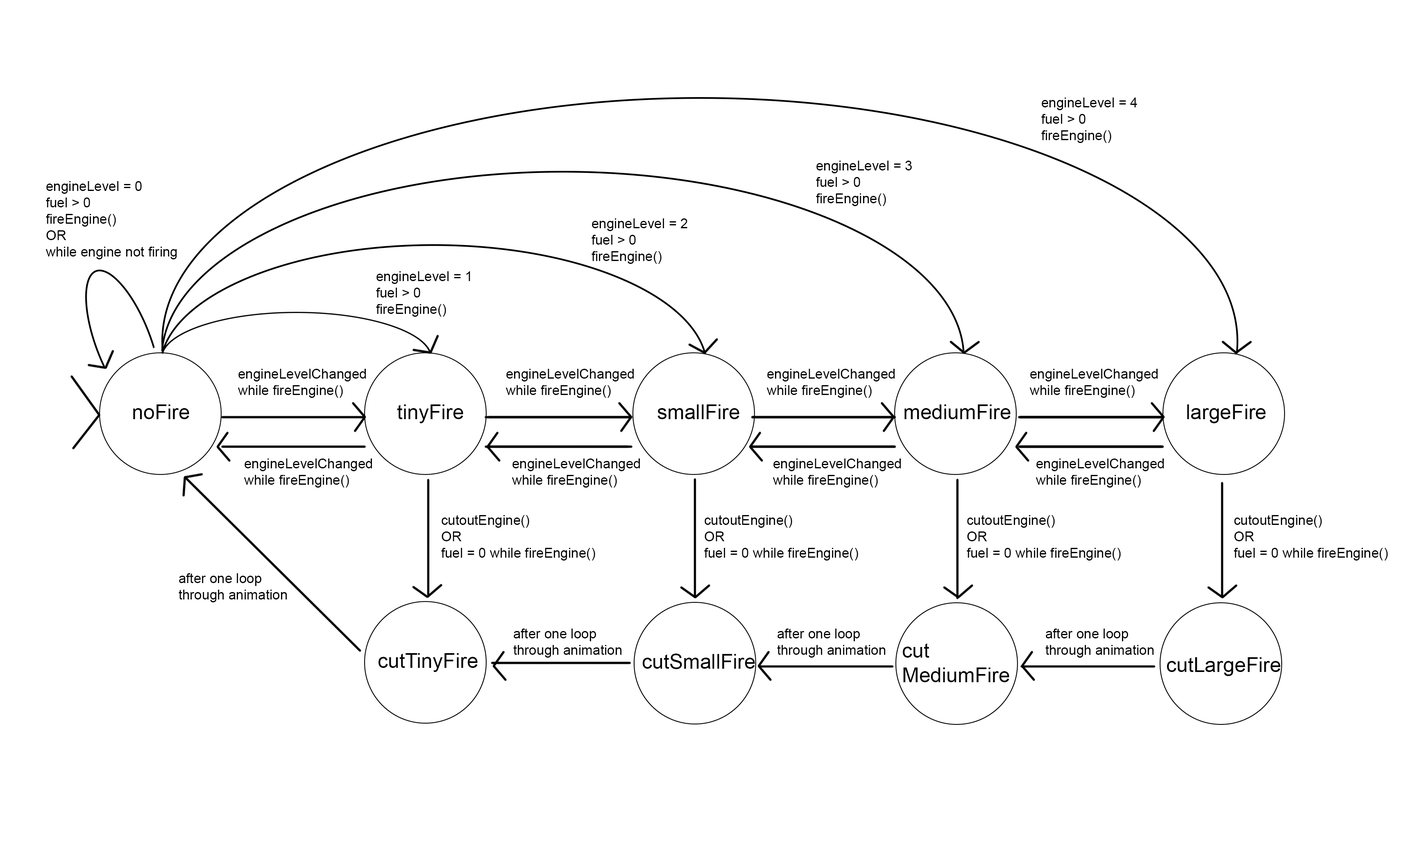
<style>
.page{position:relative;width:1405px;height:849px;background:#ffffff}
.page>*{position:absolute;margin:0}
.t1{font:13.7px "ArialMT";color:#000000}
.t2{font:20.5px "ArialMT";color:#000000}
</style>
<div class="page">
<p class="t1" style="left:1041px;top:97px;width:96px;height:46px">engineLevel = 4<br>fuel &gt; 0<br>fireEngine()</p>
<p class="t1" style="left:816px;top:161px;width:96px;height:45px">engineLevel = 3<br>fuel &gt; 0<br>fireEngine()</p>
<p class="t1" style="left:45px;top:181px;width:132px;height:78px">engineLevel = 0<br>fuel &gt; 0<br>fireEngine()<br>OR<br>while engine not firing</p>
<p class="t1" style="left:591px;top:218px;width:96px;height:46px">engineLevel = 2<br>fuel &gt; 0<br>fireEngine()</p>
<p class="t1" style="left:376px;top:271px;width:94px;height:46px">engineLevel = 1<br>fuel &gt; 0<br>fireEngine()</p>
<p class="t1" style="left:238px;top:369px;width:128px;height:29px">engineLevelChanged<br>while fireEngine()</p>
<p class="t1" style="left:505px;top:369px;width:129px;height:29px">engineLevelChanged<br>while fireEngine()</p>
<p class="t1" style="left:766px;top:369px;width:129px;height:29px">engineLevelChanged<br>while fireEngine()</p>
<p class="t1" style="left:1029px;top:369px;width:129px;height:29px">engineLevelChanged<br>while fireEngine()</p>
<p class="t2" style="left:133px;top:404px;width:56px;height:15px">noFire</p>
<p class="t2" style="left:397px;top:404px;width:66px;height:19px">tinyFire</p>
<p class="t2" style="left:657px;top:404px;width:82px;height:15px">smallFire</p>
<p class="t2" style="left:904px;top:404px;width:107px;height:15px">mediumFire</p>
<p class="t2" style="left:1187px;top:404px;width:79px;height:19px">largeFire</p>
<p class="t1" style="left:244px;top:458px;width:128px;height:29px">engineLevelChanged<br>while fireEngine()</p>
<p class="t1" style="left:512px;top:458px;width:128px;height:29px">engineLevelChanged<br>while fireEngine()</p>
<p class="t1" style="left:773px;top:458px;width:128px;height:29px">engineLevelChanged<br>while fireEngine()</p>
<p class="t1" style="left:1036px;top:458px;width:128px;height:29px">engineLevelChanged<br>while fireEngine()</p>
<p class="t1" style="left:441px;top:515px;width:154px;height:45px">cutoutEngine()<br>OR<br>fuel = 0 while fireEngine()</p>
<p class="t1" style="left:704px;top:515px;width:154px;height:45px">cutoutEngine()<br>OR<br>fuel = 0 while fireEngine()</p>
<p class="t1" style="left:967px;top:515px;width:154px;height:45px">cutoutEngine()<br>OR<br>fuel = 0 while fireEngine()</p>
<p class="t1" style="left:1234px;top:515px;width:154px;height:45px">cutoutEngine()<br>OR<br>fuel = 0 while fireEngine()</p>
<p class="t1" style="left:179px;top:573px;width:108px;height:29px">after one loop <br>through animation</p>
<p class="t1" style="left:513px;top:628px;width:109px;height:29px">after one loop <br>through animation</p>
<p class="t1" style="left:777px;top:628px;width:109px;height:29px">after one loop <br>through animation</p>
<p class="t1" style="left:1045px;top:628px;width:109px;height:29px">after one loop <br>through animation</p>
<p class="t2" style="left:378px;top:653px;width:100px;height:19px">cutTinyFire</p>
<p class="t2" style="left:643px;top:653px;width:112px;height:16px">cutSmallFire</p>
<p class="t2" style="left:903px;top:643px;width:106px;height:39px">cut<br>MediumFire</p>
<p class="t2" style="left:1167px;top:657px;width:113px;height:19px">cutLargeFire</p>
</div>
